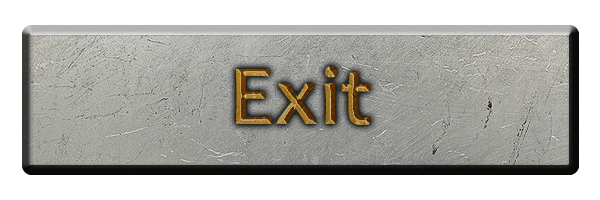
<style>
.page{position:relative;width:600px;height:200px;background:#ffffff}
.page>*{position:absolute;margin:0}
.t1{font:85px "Candara";font-weight:bold}
</style>
<div class="page">
<p class="t1" style="left:236px;top:66px;width:135px;height:59px">Exit</p>
</div>
